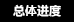
<style>
.page{position:relative;width:74px;height:22px;background:#000000}
.page>*{position:absolute;margin:0}
.t1{font:12px "MicrosoftYaHei-Bold";color:#ffffff}
</style>
<div class="page">
<p class="t1" style="left:13px;top:4px;width:48px;height:13px">总体进度</p>
</div>
